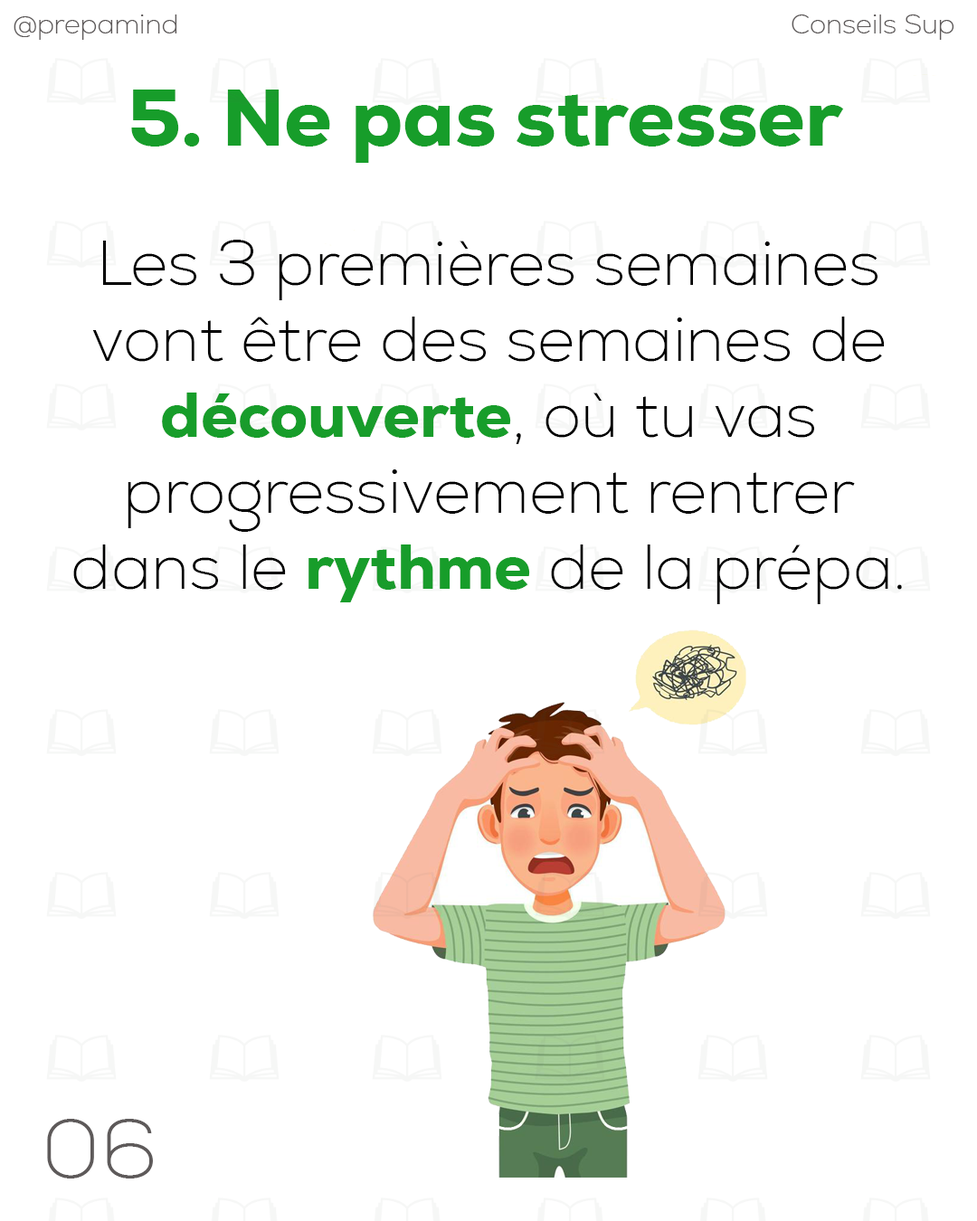
<style>
.page{position:relative;width:977px;height:1221px;background:#ffffff}
.page>*{position:absolute;margin:0}
.t1{font:27.1px "Nexa-ExtraLight";color:#5e5a5a}
.t2{font:81.2px "Nexa-Heavy";color:#179d2a}
.t3{font:63.3px "Nexa-ExtraLight";color:#000000}
.t4{font:63.3px "Nexa-Heavy";color:#179d2a}
.t5{font:81.7px "Nexa-ExtraLight";color:#5e5a5a}
</style>
<div class="page">
<p class="t1" style="left:14px;top:14px;width:163px;height:26px">@prepamind</p>
<p class="t1" style="left:791px;top:14px;width:163px;height:26px">Conseils Sup</p>
<p class="t2" style="left:131px;top:90px;width:713px;height:73px">5. Ne pas stresser</p>
<p class="t3" style="left:73px;top:240px;width:829px;height:364px;text-align:center">Les 3 premières semaines vont être des semaines de <span class="t4">découverte</span>, où tu vas progressivement rentrer dans le <span class="t4">rythme</span> de la prépa.</p>
<p class="t5" style="left:47px;top:1119px;width:106px;height:59px">06</p>
</div>
